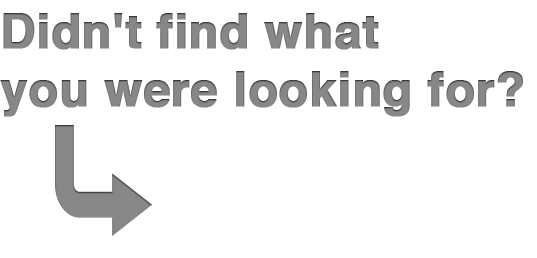
<style>
.page{position:relative;width:537px;height:258px;background:#ffffff}
.page>*{position:absolute;margin:0}
.t1{font:48px "Helvetica-Bold";color:#878787;font-weight:bold}
</style>
<div class="page">
<p class="t1" style="left:0px;top:13px;width:523px;height:104px">Didn't find what <br>you were looking for?</p>
</div>
